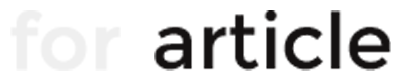
<style>
.page{position:relative;width:406px;height:77px;background:#ffffff}
.page>*{position:absolute;margin:0}
.t1{font:76.9px "Montserrat-Regular";color:#efefef;font-weight:bold}
.t2{font:76.9px "Montserrat-Regular";color:#141111}
</style>
<div class="page">
<p class="t1" style="left:10px;top:10px;width:111px;height:61px">for</p>
<p class="t2" style="left:154px;top:10px;width:237px;height:61px">article</p>
</div>
